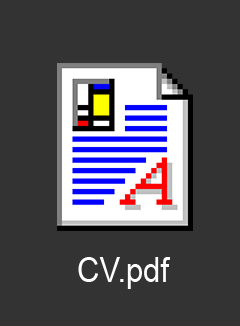
<style>
.page{position:relative;width:240px;height:326px;background:#333333}
.page>*{position:absolute;margin:0}
.t1{font:34.3px "ArialMT";color:#ffffff;scale:0.9 1}
</style>
<div class="page">
<p class="t1" style="left:78px;top:257px;width:93px;height:32px">CV.pdf</p>
</div>
